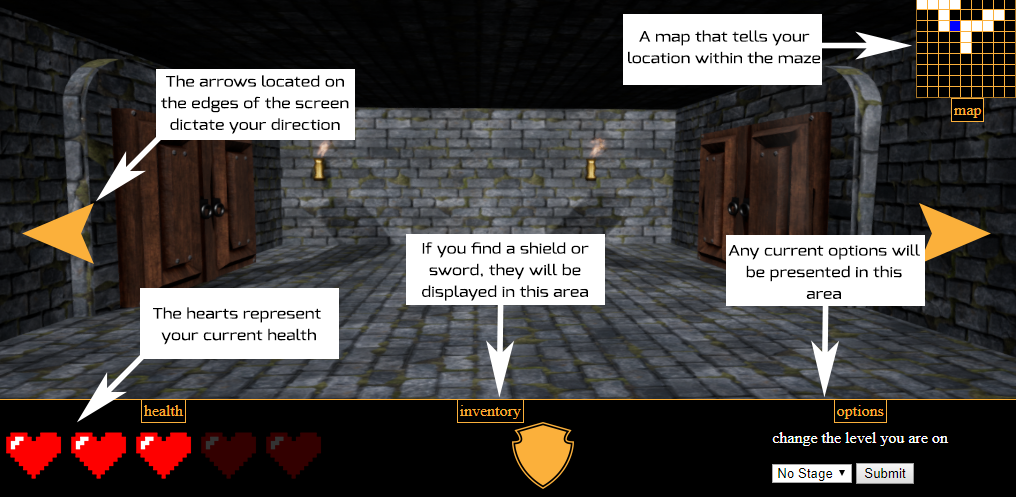
<style>
.page{position:relative;width:1016px;height:497px}
.page>*{position:absolute;margin:0}
.t1{font:14.4px "Exo-Regular";color:#000000;scale:1.25 1}
</style>
<div class="page">
<p class="t1" style="left:628px;top:30px;width:193px;height:34px;text-align:center">A map that tells your<br>location within the maze</p>
<p class="t1" style="left:161px;top:75px;width:188px;height:59px;text-align:center">The arrows located on<br>the edges of the screen<br>dictate your direction</p>
<p class="t1" style="left:422px;top:242px;width:167px;height:59px;text-align:center">If you find a shield or<br>sword, they will be<br>displayed in this area</p>
<p class="t1" style="left:728px;top:244px;width:192px;height:55px;text-align:center">Any current options will<br>be presented in this<br>area</p>
<p class="t1" style="left:153px;top:307px;width:168px;height:38px;text-align:center">The hearts represent <br>your current health</p>
</div>
